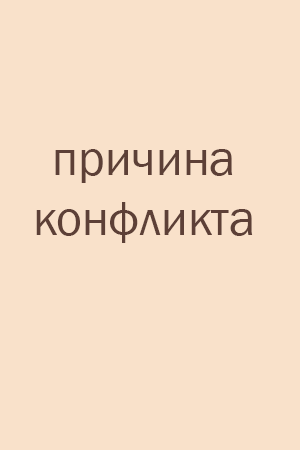
<style>
.page{position:relative;width:300px;height:450px;background:#f9e1ca}
.page>*{position:absolute;margin:0}
.t1{font:50px "FranklinGothic-Book";color:#5d4037}
</style>
<div class="page">
<p class="t1" style="left:36px;top:149px;width:217px;height:94px;text-align:center">причина<br>конфликта</p>
</div>
